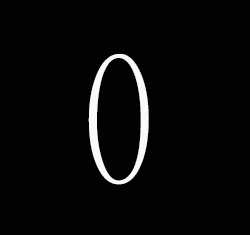
<style>
.page{position:relative;width:250px;height:235px;background:#010201}
.page>*{position:absolute;margin:0}
.t1{font:200px "STKaiti";color:#faf9f9;scale:0.43 1}
</style>
<div class="page">
<p class="t1" style="left:88px;top:54px;width:61px;height:131px">O</p>
</div>
